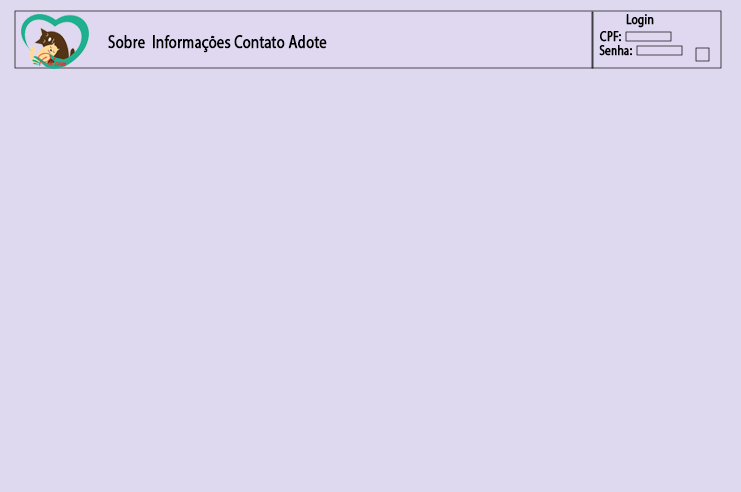
<style>
.page{position:relative;width:741px;height:492px;background:#dfd9f0}
.page>*{position:absolute;margin:0}
.t1{font:14px "MyriadPro-Regular";color:#000000;font-weight:bold;scale:0.8 1}
.t2{font:18px "MyriadPro-Regular";color:#000000;font-weight:bold;scale:0.8 1}
</style>
<div class="page">
<p class="t1" style="left:626px;top:14px;width:28px;height:14px">Login</p>
<p class="t2" style="left:108px;top:35px;width:219px;height:18px">Sobre  Informações Contato Adote</p>
<p class="t1" style="left:600px;top:31px;width:21px;height:11px">CPF:</p>
<p class="t1" style="left:599px;top:45px;width:33px;height:11px">Senha:</p>
</div>
